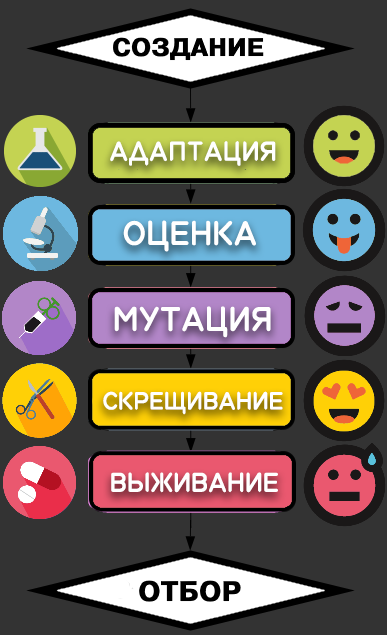
<style>
.page{position:relative;width:387px;height:635px;background:#333333}
.page>*{position:absolute;margin:0}
.t1{font:32px "GOST2600885";color:#ffffff}
.t2{font:40px "GOST2600885";color:#ffffff}
.t3{font:29.3px "GOST2600885";color:#ffffff}
</style>
<div class="page">
<p class="t1" style="left:110px;top:141px;width:166px;height:25px">АДАПТАЦИЯ</p>
<p class="t2" style="left:123px;top:220px;width:133px;height:32px">ОЦЕНКА</p>
<p class="t2" style="left:114px;top:306px;width:157px;height:32px">МУТАЦИЯ</p>
<p class="t3" style="left:103px;top:391px;width:180px;height:24px">СКРЕЩИВАНИЕ</p>
<p class="t1" style="left:111px;top:472px;width:167px;height:21px">ВЫЖИВАНИЕ</p>
</div>
